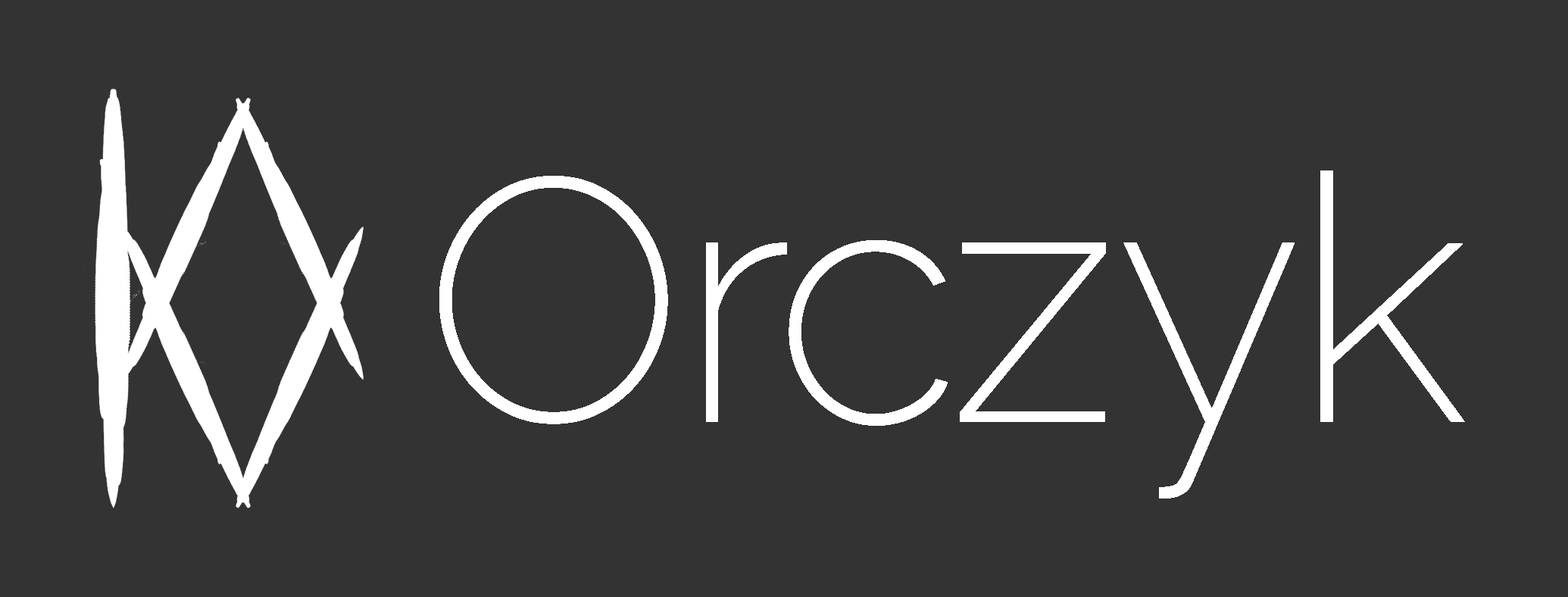
<style>
.page{position:relative;width:1568px;height:597px;background:#333333}
.page>*{position:absolute;margin:0}
.t1{font:344.1px "Raleway-ExtraLight";color:#ffffff}
</style>
<div class="page">
<p class="t1" style="left:439px;top:170px;width:1026px;height:328px">Orczyk</p>
</div>
